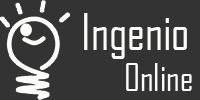
<style>
.page{position:relative;width:200px;height:100px;background:#333333}
.page>*{position:absolute;margin:0}
.t1{font:48px "AgencyFB-Reg";color:#fbfbf9}
.t2{font:36px "AgencyFB-Reg";color:#fbfbf9}
</style>
<div class="page">
<p class="t1" style="left:84px;top:13px;width:103px;height:46px">Ingenio</p>
<p class="t2" style="left:126px;top:63px;width:66px;height:28px">Online</p>
</div>
